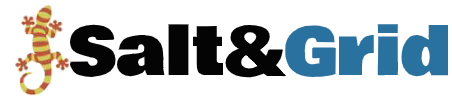
<style>
.page{position:relative;width:452px;height:100px;background:#ffffff}
.page>*{position:absolute;margin:0}
.t1{font:66px "BowlbyOne-Regular";color:#040404}
.t2{font:66px "BowlbyOne-Regular";color:#2972a0}
</style>
<div class="page">
<p class="t1" style="left:69px;top:23px;width:379px;height:55px">Salt&amp;<span class="t2">Grid</span></p>
</div>
